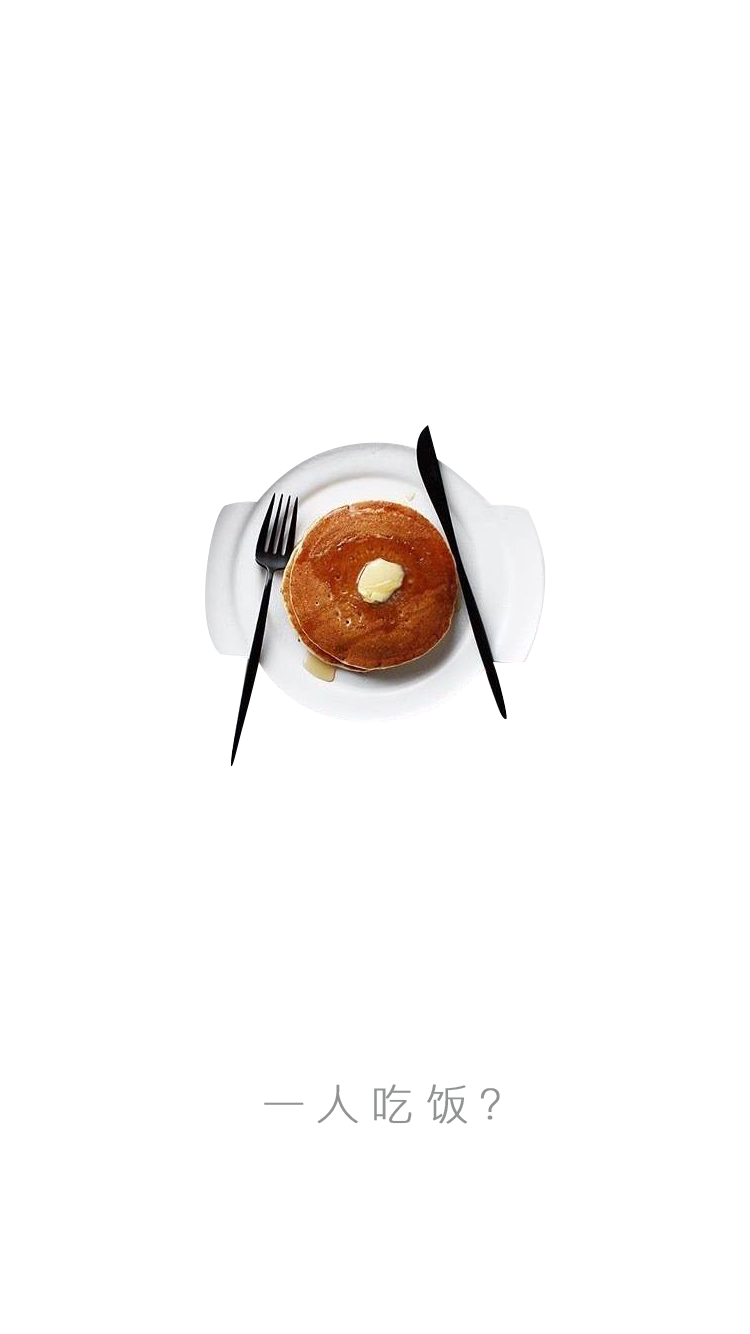
<style>
.page{position:relative;width:750px;height:1334px;background:#ffffff}
.page>*{position:absolute;margin:0}
.t1{font:42.4px "PingFang-SC-Light";letter-spacing:0.252em;color:#919393;font-weight:bold}
</style>
<div class="page">
<p class="t1" style="left:264px;top:1084px;width:236px;height:40px">一人吃饭？</p>
</div>
